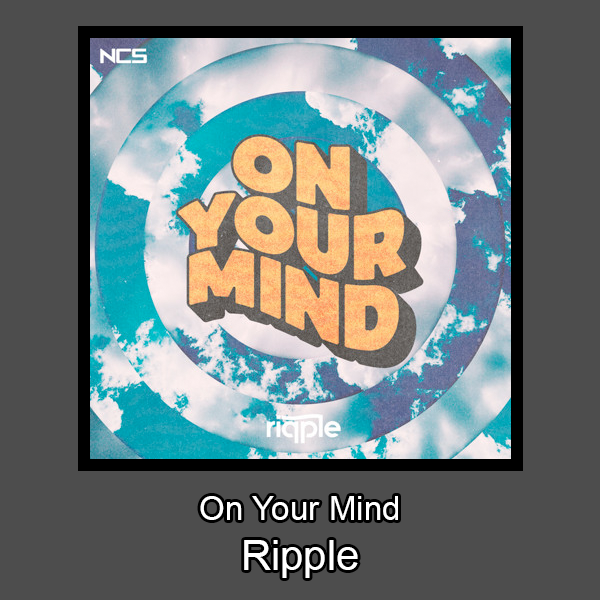
<style>
.page{position:relative;width:600px;height:600px;background:#4d4d4d}
.page>*{position:absolute;margin:0}
.t1{font:33.3px "ArialMT";color:#ffffff}
.t2{font:41.7px "ArialMT";color:#ffffff}
</style>
<div class="page">
<p class="t1" style="left:200px;top:496px;width:198px;height:82px;text-align:center">On Your Mind<br><span class="t2">Ripple</span></p>
</div>
